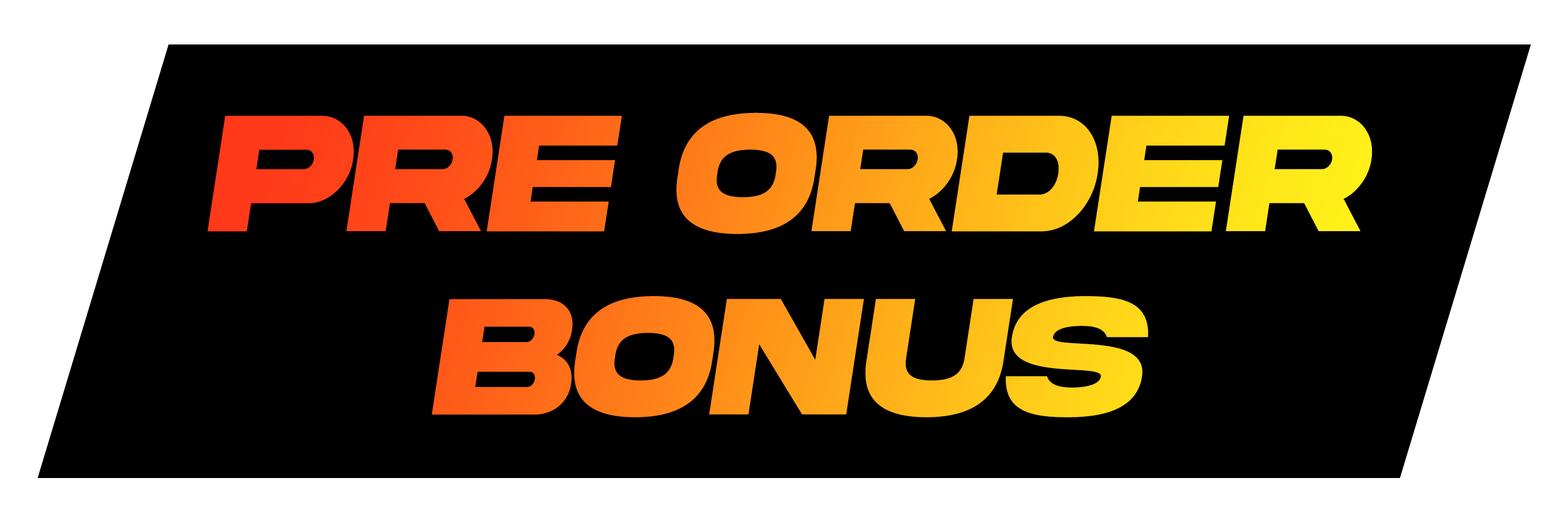
<style>
.page{position:relative;width:1568px;height:523px;background:#000000}
.page>*{position:absolute;margin:0}
.t1{font:175.5px "AkiraExpanded-SuperBold";letter-spacing:-0.04em;font-style:italic;scale:0.87 1}
</style>
<div class="page">
<p class="t1" style="left:207px;top:112px;width:1165px;height:305px;text-align:center">PRE Order<br>Bonus</p>
</div>
